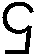
<style>
.page{position:relative;width:35px;height:56px;background:#ffffff}
.page>*{position:absolute;margin:0}
.t1{font:66px "OPPOSans-R";color:#000000}
</style>
<div class="page">
<p class="t1" style="left:2px;top:2px;width:32px;height:52px;rotate:180deg">5</p>
</div>
